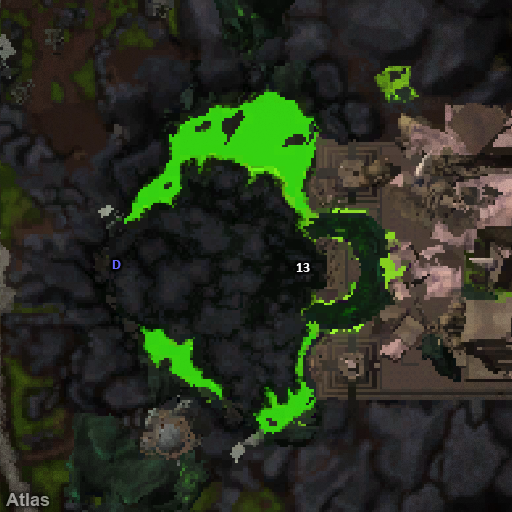
<style>
.page{position:relative;width:512px;height:512px}
.page>*{position:absolute;margin:0}
.t1{font:14px "Calibri-Bold";color:#6666ff}
.t2{font:14px "Calibri-Bold";color:#ffffff}
</style>
<div class="page">
<p class="t1" style="left:112px;top:260px;width:9px;height:9px">D</p>
<p class="t2" style="left:296px;top:263px;width:14px;height:9px">13</p>
</div>
